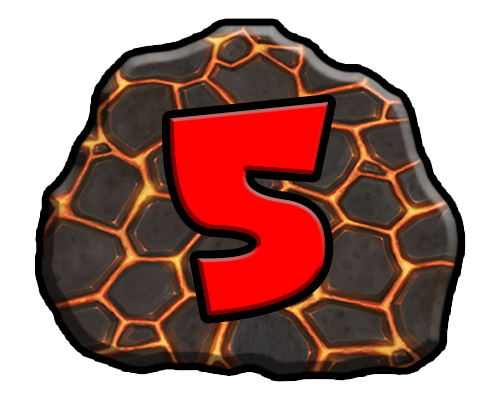
<style>
.page{position:relative;width:500px;height:400px;background:#ffffff}
.page>*{position:absolute;margin:0}
.t1{font:257.3px "Funhouse";color:#ff0000}
</style>
<div class="page">
<p class="t1" style="left:170px;top:102px;width:159px;height:214px">5</p>
</div>
